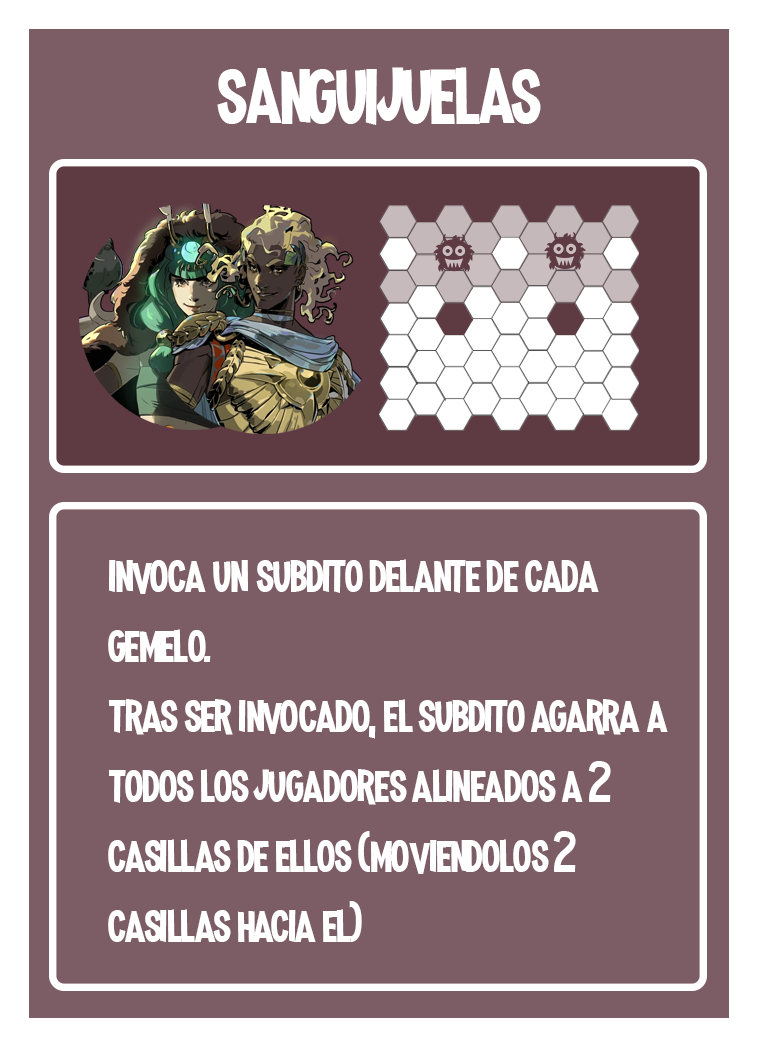
<style>
.page{position:relative;width:758px;height:1047px;background:#7d5d65}
.page>*{position:absolute;margin:0}
.t1{font:100px "MadnessHyperactive";color:#ffffff}
.t2{font:58.3px "MadnessHyperactive";color:#ffffff}
</style>
<div class="page">
<p class="t1" style="left:217px;top:67px;width:324px;height:58px">sanguijuelas</p>
<p class="t2" style="left:108px;top:559px;width:560px;height:383px">invoca un subdito delante de cada gemelo.<br>tras ser invocado, el subdito agarra a todos los jugadores alineados a 2 casillas de ellos (moviendolos 2 casillas hacia el)</p>
</div>
